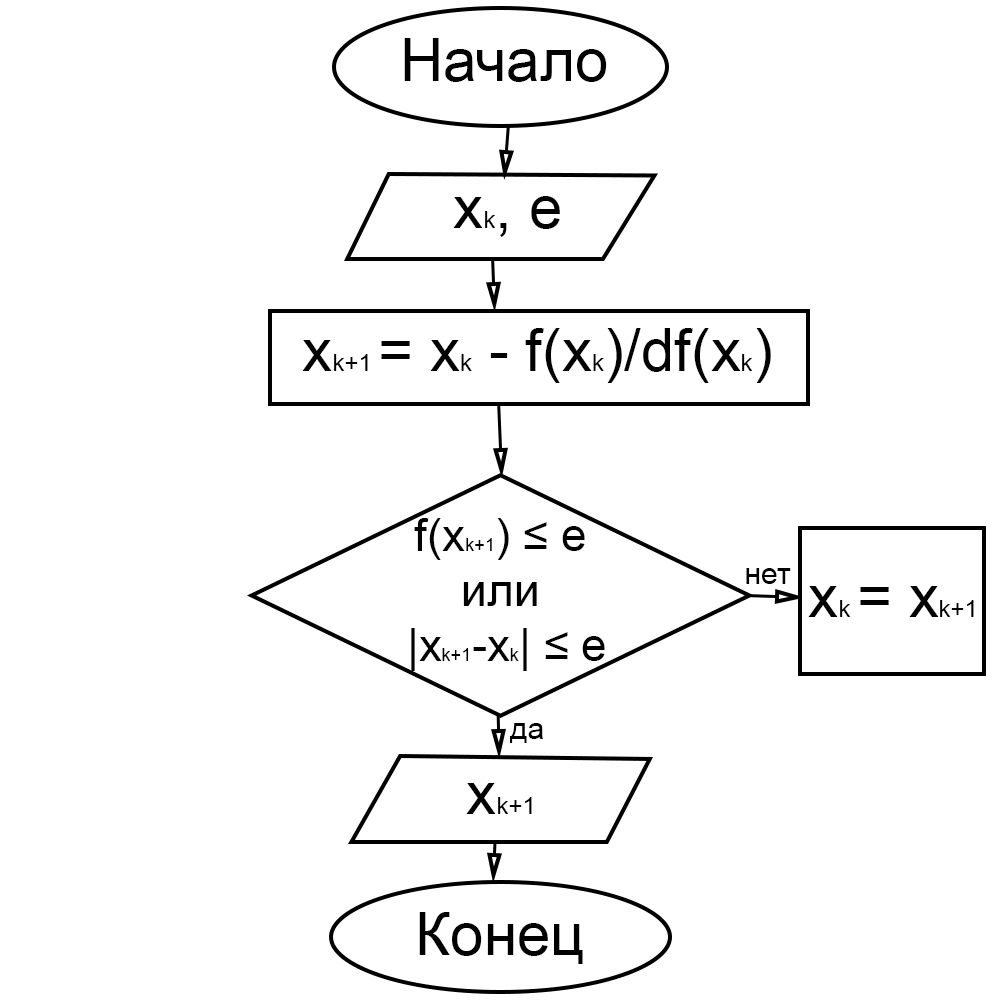
<style>
.page{position:relative;width:1000px;height:1000px;background:#ffffff}
.page>*{position:absolute;margin:0}
.t1{font:60px "ArialMT";color:#000000}
.t2{font:24px "ArialMT";color:#000000}
.t3{font:45.8px "ArialMT";color:#000000}
.t4{font:18.3px "ArialMT";color:#000000}
.t5{font:30px "ArialMT";color:#000000}
</style>
<div class="page">
<p class="t1" style="left:404px;top:38px;width:203px;height:44px">Начало</p>
<p class="t1" style="left:453px;top:196px;width:107px;height:41px">x<span class="t2">k</span>, e</p>
<p class="t1" style="left:302px;top:328px;width:469px;height:55px">x<span class="t2">k+1 </span>= x<span class="t2">k</span> - f(x<span class="t2">k</span>)/df(x<span class="t2">k</span>)</p>
<p class="t3" style="left:411px;top:518px;width:194px;height:153px;text-align:center">f(x<span class="t4">k+1</span>) ≤ e <br>или <br>|x<span class="t4">k+1</span>-x<span class="t4">k</span>| ≤ e</p>
<p class="t5" style="left:746px;top:568px;width:45px;height:16px">нет</p>
<p class="t1" style="left:808px;top:586px;width:166px;height:31px">x<span class="t2">k </span>= x<span class="t2">k+1</span></p>
<p class="t5" style="left:510px;top:723px;width:33px;height:20px">да</p>
<p class="t2" style="left:466px;top:783px;width:66px;height:31px"><span class="t1">x</span>k+1</p>
<p class="t1" style="left:419px;top:912px;width:164px;height:52px">Конец</p>
</div>
